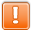
<style>
.page{position:relative;width:32px;height:32px}
.page>*{position:absolute;margin:0}
.t1{font:24.3px "MyriadPro-Regular";color:#ffffff;font-weight:bold;scale:1.47 1}
</style>
<div class="page">
<p class="t1" style="left:13px;top:6px;width:6px;height:18px">!</p>
</div>
